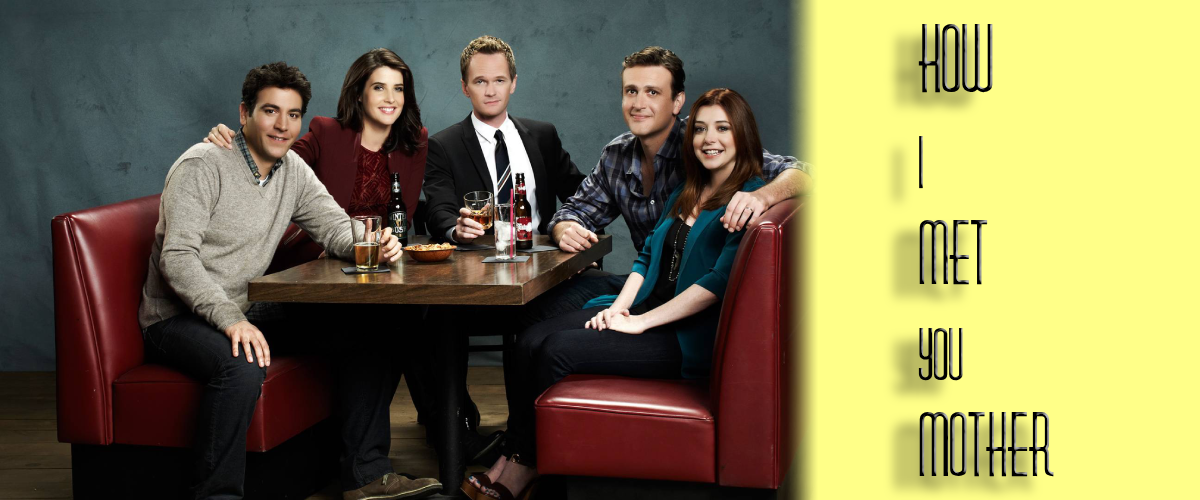
<style>
.page{position:relative;width:1200px;height:500px;background:#ffff88}
.page>*{position:absolute;margin:0}
.t1{font:80px/96px "Diner-Fatt"}
.t2{font:85px/96px "Diner-Fatt"}
.t3{font:65px/96px "Diner-Fatt"}
</style>
<div class="page">
<p class="t1" style="left:918px;top:23px;width:136px;height:454px"><span class="t2">How<br></span><span class="t3">i<br></span>met<br><span class="t3">you<br></span>mother</p>
</div>
